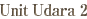
<style>
.page{position:relative;width:87px;height:19px;background:#ffffff}
.page>*{position:absolute;margin:0}
.t1{font:15.5px "RyuminPro-ExBold";letter-spacing:-0.04em}
</style>
<div class="page">
<p class="t1" style="left:0px;top:4px;width:88px;height:12px">Unit Udara 2</p>
</div>
